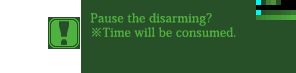
<style>
.page{position:relative;width:296px;height:73px;background:#285028}
.page>*{position:absolute;margin:0}
.t1{font:9px "KozMinPro-Medium";letter-spacing:0.025em;color:#50b040}
</style>
<div class="page">
<p class="t1" style="left:90px;top:13px;width:146px;height:24px">Pause the disarming?<br>※Time will be consumed.</p>
</div>
